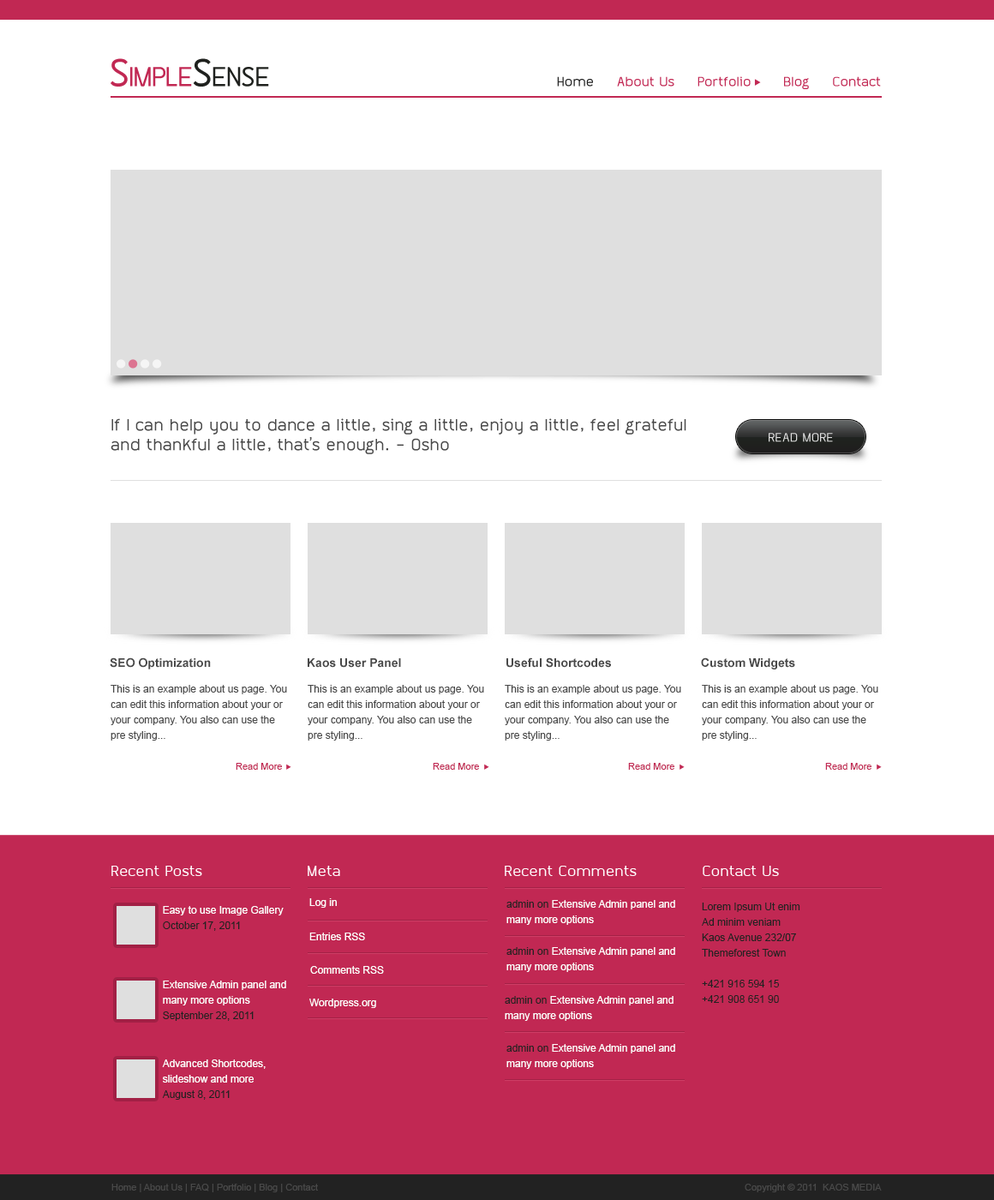
<style>
.page{position:relative;width:994px;height:1200px;background:#ffffff}
.page>*{position:absolute;margin:0}
.t1{font:41.1px "Often";letter-spacing:-0.05em;color:#c12853;font-variant:small-caps}
.t2{font:41.1px "Often";letter-spacing:-0.05em;color:#1f211e;font-variant:small-caps}
.t3{font:13.7px "Often";color:#c12853}
.t4{font:13.7px "Often";color:#222222}
.t5{font:17.1px/19.7px "Often";color:#494949}
.t6{font:12.9px "Often";color:#dfdfdf}
.t7{font:12px "Arial-BoldMT";color:#494949}
.t8{font:10.3px/15.4px "ArialMT";color:#494949}
.t9{font:9.4px "ArialMT";color:#c12853}
.t10{font:15.4px "Often";color:#ffffff}
.t11{font:10.3px/15.4px "ArialMT";color:#ffffff}
.t12{font:10.3px/15.4px "ArialMT";color:#222222}
.t13{font:10.3px "ArialMT";color:#ffffff}
.t14{font:9.4px "ArialMT";color:#494949}
</style>
<div class="page">
<p class="t1" style="left:111px;top:58px;width:158px;height:29px">Simple<span class="t2">Sense</span></p>
<p class="t3" style="left:557px;top:76px;width:324px;height:13px"><span class="t4">Home</span>     About Us     Portfolio       Blog     Contact</p>
<p class="t5" style="left:111px;top:418px;width:575px;height:36px">If I can help you to dance a little, sing a little, enjoy a little, feel grateful and thankful a little, that’s enough. - Osho</p>
<p class="t6" style="left:769px;top:433px;width:64px;height:9px">READ MORE</p>
<p class="t7" style="left:110px;top:657px;width:101px;height:12px">SEO Optimization</p>
<p class="t7" style="left:308px;top:658px;width:93px;height:10px">Kaos User Panel</p>
<p class="t7" style="left:506px;top:657px;width:105px;height:11px">Useful Shortcodes</p>
<p class="t7" style="left:701px;top:657px;width:94px;height:12px">Custom Widgets</p>
<p class="t8" style="left:111px;top:685px;width:176px;height:55px">This is an example about us page. You can edit this information about your or your company. You also can use the pre styling...</p>
<p class="t8" style="left:308px;top:685px;width:176px;height:55px">This is an example about us page. You can edit this information about your or your company. You also can use the pre styling...</p>
<p class="t8" style="left:505px;top:685px;width:176px;height:55px">This is an example about us page. You can edit this information about your or your company. You also can use the pre styling...</p>
<p class="t8" style="left:702px;top:685px;width:176px;height:55px">This is an example about us page. You can edit this information about your or your company. You also can use the pre styling...</p>
<p class="t9" style="left:236px;top:763px;width:46px;height:6px">Read More</p>
<p class="t9" style="left:433px;top:763px;width:46px;height:6px">Read More</p>
<p class="t9" style="left:628px;top:763px;width:46px;height:6px">Read More</p>
<p class="t9" style="left:825px;top:763px;width:46px;height:6px">Read More</p>
<p class="t10" style="left:111px;top:865px;width:91px;height:11px">Recent Posts</p>
<p class="t10" style="left:308px;top:865px;width:32px;height:11px">Meta</p>
<p class="t10" style="left:505px;top:865px;width:132px;height:11px">Recent Comments</p>
<p class="t10" style="left:703px;top:865px;width:76px;height:11px">Contact Us</p>
<p class="t11" style="left:163px;top:906px;width:121px;height:25px">Easy to use Image Gallery<br><span class="t12">October 17, 2011</span></p>
<p class="t13" style="left:309px;top:898px;width:28px;height:9px">Log in</p>
<p class="t11" style="left:506px;top:900px;width:169px;height:25px"><span class="t12">admin on </span>Extensive Admin panel and many more options</p>
<p class="t12" style="left:702px;top:902px;width:98px;height:101px">Lorem Ipsum Ut enim<br>Ad minim veniam<br>Kaos Avenue 232/07<br>Themeforest Town<br><br>+421 916 594 15<br>+421 908 651 90</p>
<p class="t13" style="left:309px;top:932px;width:56px;height:8px">Entries RSS</p>
<p class="t11" style="left:506px;top:947px;width:169px;height:25px"><span class="t12">admin on </span>Extensive Admin panel and many more options</p>
<p class="t13" style="left:310px;top:966px;width:74px;height:7px">Comments RSS</p>
<p class="t11" style="left:163px;top:980px;width:123px;height:41px">Extensive Admin panel and many more options<br><span class="t12">September 28, 2011</span></p>
<p class="t13" style="left:309px;top:998px;width:67px;height:10px">Wordpress.org</p>
<p class="t11" style="left:505px;top:996px;width:169px;height:25px"><span class="t12">admin on </span>Extensive Admin panel and many more options</p>
<p class="t11" style="left:506px;top:1044px;width:169px;height:25px"><span class="t12">admin on </span>Extensive Admin panel and many more options</p>
<p class="t11" style="left:162px;top:1059px;width:104px;height:40px">Advanced Shortcodes, slideshow and more<br><span class="t12">August 8, 2011</span></p>
<p class="t14" style="left:111px;top:1183px;width:207px;height:9px">Home | About Us | FAQ | Portfolio | Blog | Contact</p>
<p class="t14" style="left:745px;top:1183px;width:137px;height:9px">Copyright © 2011  KAOS MEDIA</p>
</div>
